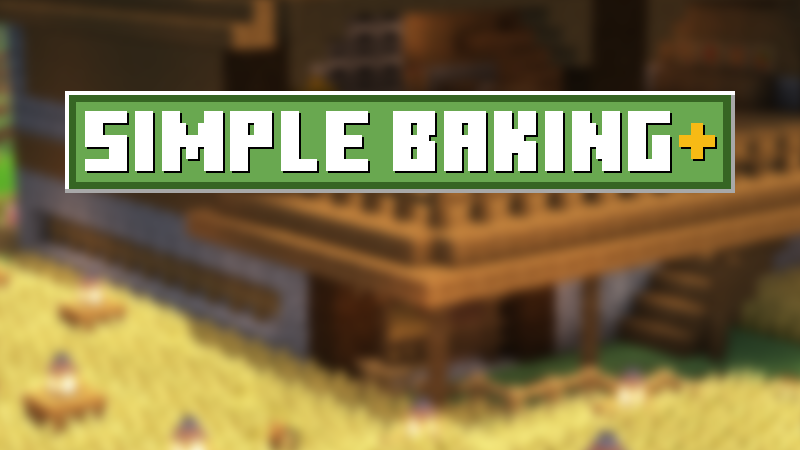
<style>
.page{position:relative;width:800px;height:450px}
.page>*{position:absolute;margin:0}
.t1{font:85.9px "MinecraftTen";color:#ffffff}
.t2{font:85.9px "MinecraftTen";color:#f7ba15}
</style>
<div class="page">
<p class="t1" style="left:85px;top:111px;width:630px;height:60px">Simple Baking<span class="t2">+</span></p>
<p class="t1" style="left:87px;top:113px;width:630px;height:60px">Simple Baking<span class="t2">+</span></p>
</div>
